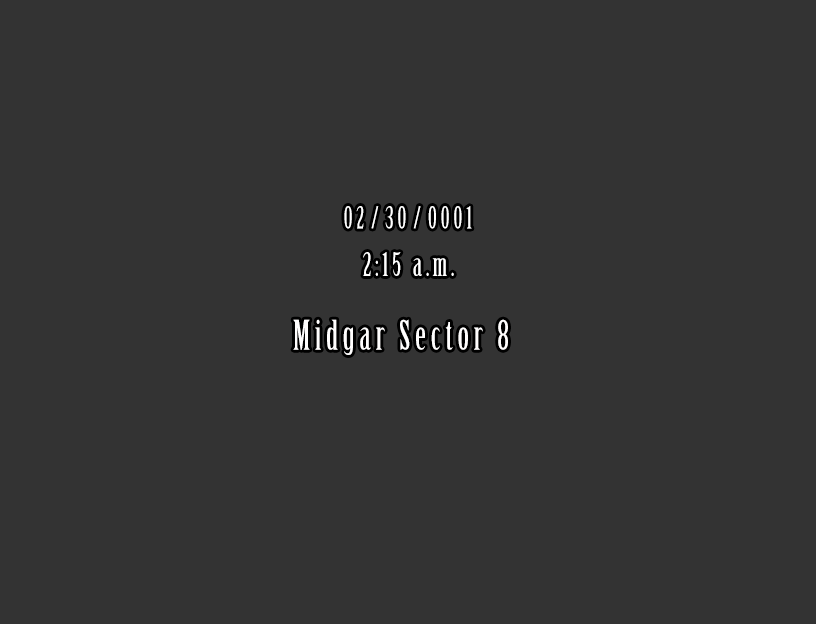
<style>
.page{position:relative;width:816px;height:624px;background:#333333}
.page>*{position:absolute;margin:0}
.t1{font:30px "BirchStd";color:#ffffff}
.t2{font:32px "BirchStd";color:#ffffff}
.t3{font:40px "BirchStd";color:#fffefe}
</style>
<div class="page">
<p class="t1" style="left:344px;top:206px;width:128px;height:23px">0 2  /  3 0  /  0 0 0 1</p>
<p class="t2" style="left:363px;top:252px;width:91px;height:24px">2 : 1 5   a . m .</p>
<p class="t3" style="left:293px;top:319px;width:215px;height:36px">M i d g a r   S e c t o r   8</p>
</div>
